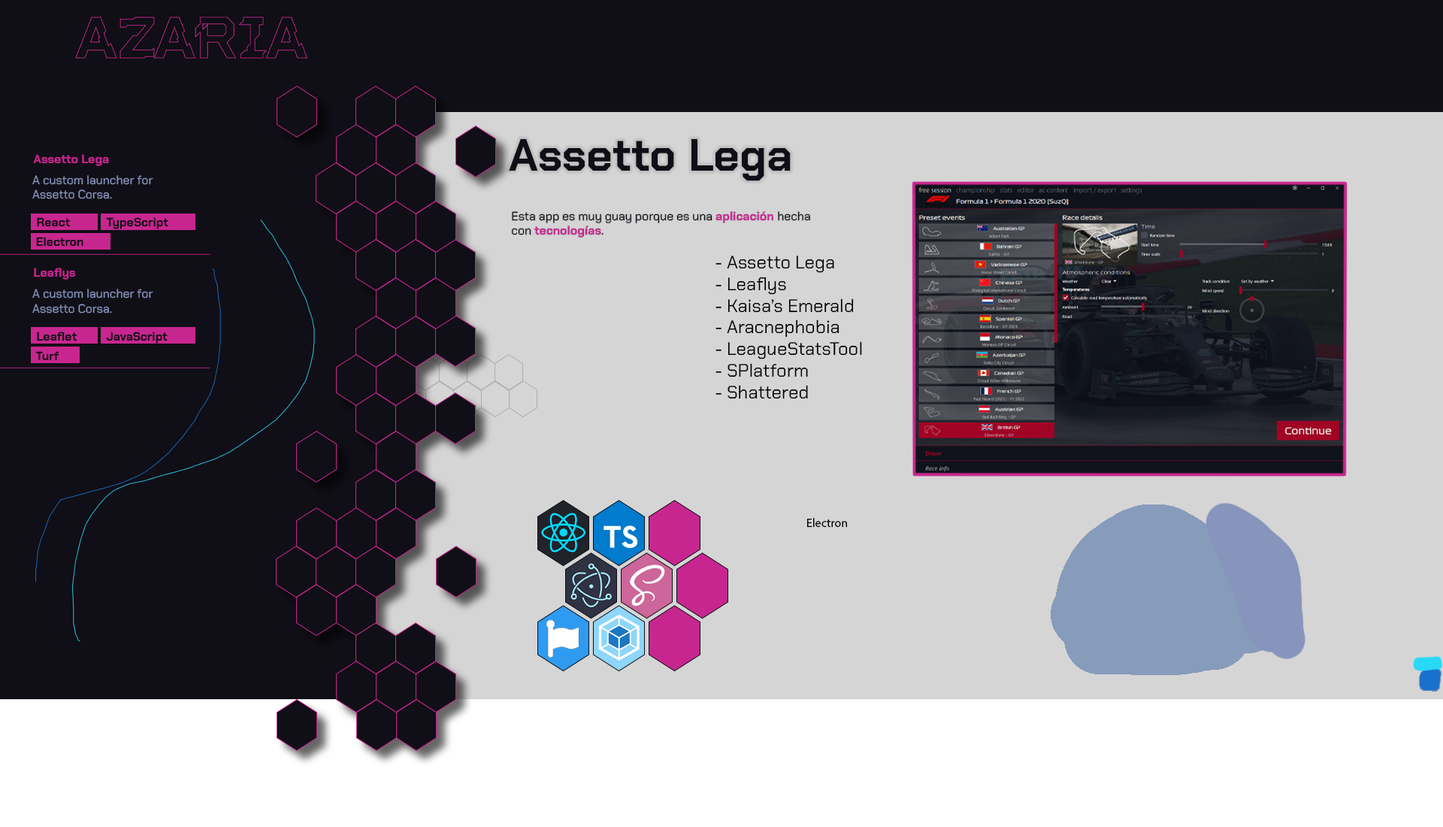
<style>
.page{position:relative;width:1443px;height:827px;background:#100e16}
.page>*{position:absolute;margin:0}
.t1{font:45.1px "ChakraPetch-Bold";color:#100e16}
.t2{font:12px "ChakraPetch-Bold";color:#c8268f}
.t3{font:12px "ChakraPetch-Regular";color:#8794bb}
.t4{font:12px "ChakraPetch-Bold";color:#100e16}
.t5{font:12px "ChakraPetch-Regular";color:#100e16}
.t6{font:18px "ChakraPetch-Regular";color:#000000}
.t7{font:12px "MyriadPro-Regular";color:#000000}
</style>
<div class="page">
<p class="t1" style="left:509px;top:139px;width:281px;height:42px">Assetto Lega</p>
<p class="t2" style="left:33px;top:154px;width:76px;height:12px">Assetto Lega</p>
<p class="t3" style="left:32px;top:175px;width:121px;height:24px">A custom launcher for<br>Assetto Corsa.</p>
<p class="t4" style="left:37px;top:217px;width:34px;height:10px">React</p>
<p class="t4" style="left:106px;top:217px;width:62px;height:12px">TypeScript</p>
<p class="t5" style="left:512px;top:211px;width:298px;height:26px">Esta app es muy guay porque es una <span class="t2">aplicación </span>hecha<br>con <span class="t2">tecnologías</span>.</p>
<p class="t4" style="left:36px;top:237px;width:47px;height:9px">Electron</p>
<p class="t6" style="left:715px;top:255px;width:147px;height:144px">- Assetto Lega<br>- Leaflys<br>- Kaisa’s Emerald<br>- Aracnephobia<br>- LeagueStatsTool<br>- SPlatform<br>- Shattered</p>
<p class="t2" style="left:34px;top:267px;width:42px;height:13px">Leaflys</p>
<p class="t3" style="left:32px;top:289px;width:121px;height:24px">A custom launcher for<br>Assetto Corsa.</p>
<p class="t4" style="left:37px;top:331px;width:40px;height:10px">Leaflet</p>
<p class="t4" style="left:106px;top:331px;width:62px;height:12px">JavaScript</p>
<p class="t4" style="left:35px;top:351px;width:24px;height:10px">Turf</p>
<p class="t7" style="left:807px;top:518px;width:40px;height:9px">Electron</p>
</div>
